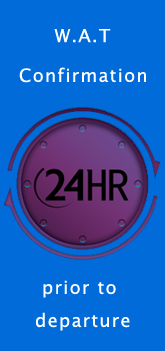
<style>
.page{position:relative;width:165px;height:351px;background:#006bd9}
.page>*{position:absolute;margin:0}
.t1{font:18px "LucidaSans";letter-spacing:0.07em;color:#ffffff}
.t2{font:18px/33px "LucidaSans";letter-spacing:0.07em;color:#ffffff}
</style>
<div class="page">
<p class="t1" style="left:54px;top:29px;width:57px;height:14px">W.A.T</p>
<p class="t1" style="left:19px;top:67px;width:127px;height:16px">Confirmation</p>
<p class="t2" style="left:36px;top:280px;width:94px;height:51px;text-align:center">prior to <br>departure</p>
</div>
